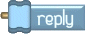
<style>
.page{position:relative;width:85px;height:34px;background:#ffffff}
.page>*{position:absolute;margin:0}
.t1{font:20px "36daysagoBRK";color:#efffff}
</style>
<div class="page">
<p class="t1" style="left:37px;top:9px;width:37px;height:19px">reply</p>
</div>
